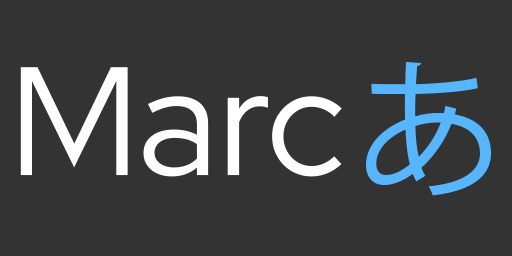
<style>
.page{position:relative;width:512px;height:256px;background:#333333}
.page>*{position:absolute;margin:0}
.t1{font:150px "KozGoPr6N-Regular";color:#57b5fd}
.t2{font:154.2px "RedHatDisplayRoman-Regular";color:#ffffff}
</style>
<div class="page">
<p class="t1" style="left:366px;top:61px;width:126px;height:135px">あ</p>
<p class="t2" style="left:20px;top:67px;width:322px;height:110px">Marc</p>
</div>
